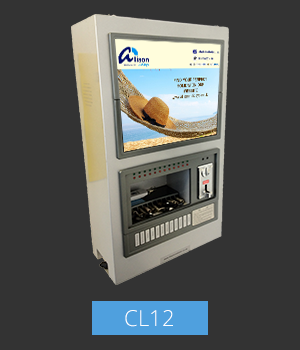
<style>
.page{position:relative;width:300px;height:350px;background:#333333}
.page>*{position:absolute;margin:0}
.t1{font:22px "OpenSans-Light";color:#ffffff}
</style>
<div class="page">
<p class="t1" style="left:125px;top:310px;width:48px;height:17px">CL12</p>
</div>
